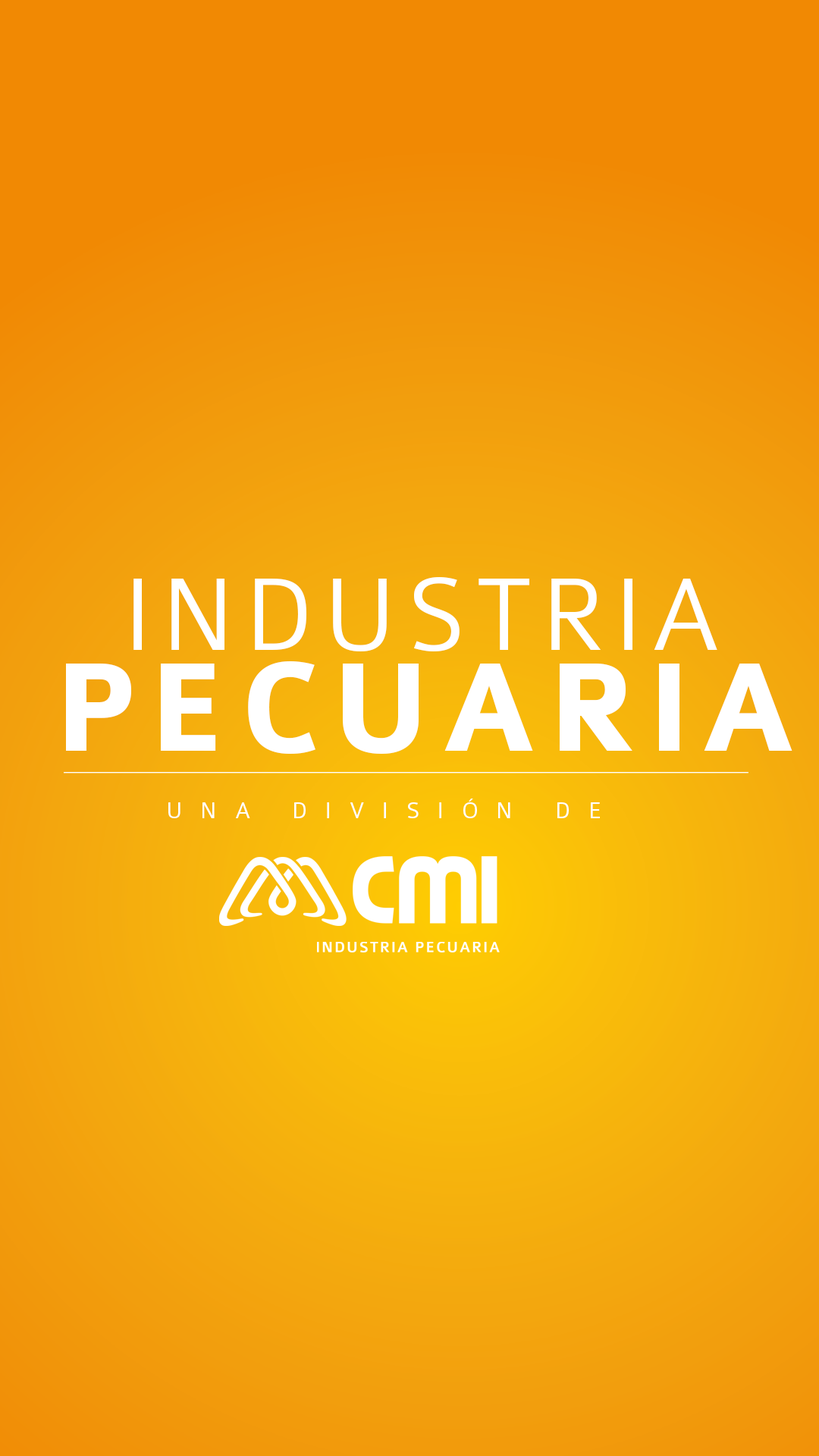
<style>
.page{position:relative;width:819px;height:1456px}
.page>*{position:absolute;margin:0}
.t1{font:110.7px/100.5px "Colaborate-Light";letter-spacing:0.08em;color:#ffffff}
.t2{font:134.6px/100.5px "Colaborate-Bold";letter-spacing:0.08em;color:#ffffff}
.t3{font:24.4px "Colaborate-Light";letter-spacing:0.74em;color:#ffffff}
</style>
<div class="page">
<p class="t1" style="left:66px;top:577px;width:726px;height:177px;text-align:center">INDUSTRIA <br><span class="t2">PECUARIA</span></p>
<p class="t3" style="left:168px;top:799px;width:432px;height:19px">UNA DIVISIÓN DE</p>
</div>
